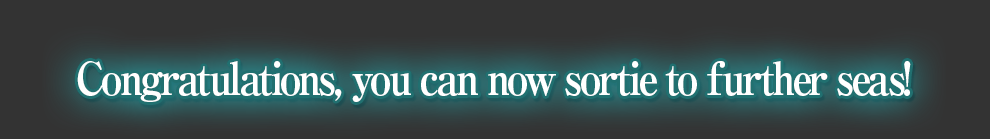
<style>
.page{position:relative;width:990px;height:139px;background:#333333}
.page>*{position:absolute;margin:0}
.t1{font:45px "RyuminPro-ExBold";letter-spacing:-0.08em;color:#ffffff;scale:0.9 1}
</style>
<div class="page">
<p class="t1" style="left:77px;top:61px;width:834px;height:41px">Congratulations, you can now sortie to further seas!</p>
</div>
